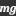
<style>
.page{position:relative;width:16px;height:16px;background:#333333}
.page>*{position:absolute;margin:0}
.t1{font:12px "Cambria-BoldItalic";color:#f6f6f6}
</style>
<div class="page">
<p class="t1" style="left:0px;top:6px;width:17px;height:9px">mg</p>
</div>
